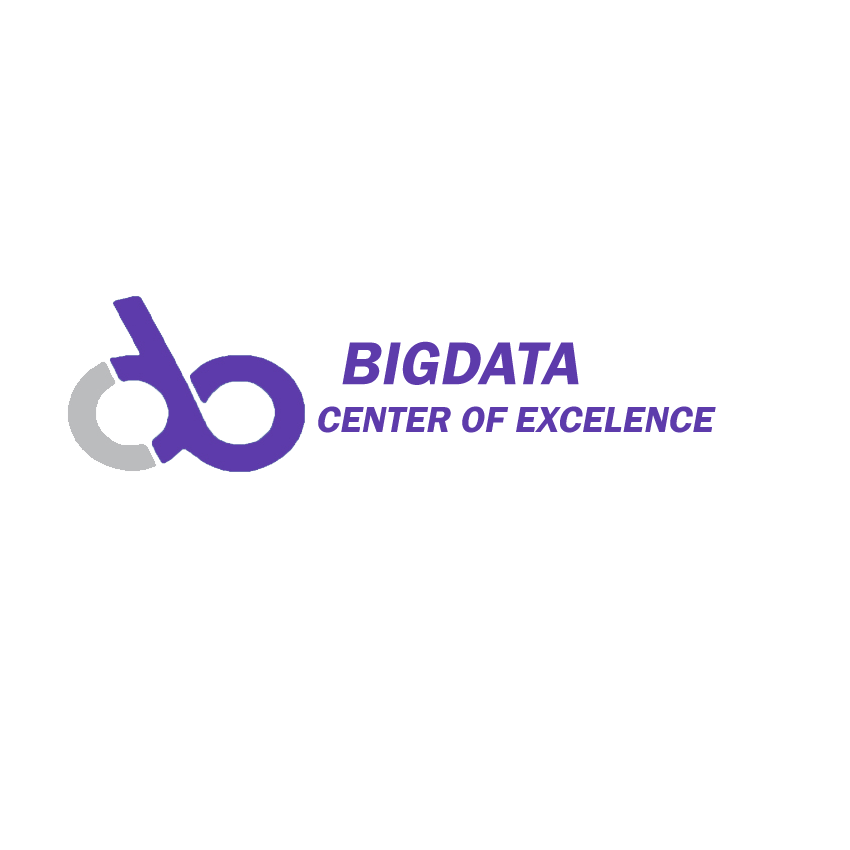
<style>
.page{position:relative;width:850px;height:850px;background:#ffffff}
.page>*{position:absolute;margin:0}
.t1{font:62.4px "FranklinGothic-Demi";color:#5d3bab;font-style:italic}
.t2{font:37.4px "FranklinGothic-Demi";color:#5d3bab;font-style:italic}
</style>
<div class="page">
<p class="t1" style="left:342px;top:341px;width:237px;height:44px">BIGDATA</p>
<p class="t2" style="left:318px;top:406px;width:398px;height:27px">CENTER OF EXCELENCE</p>
</div>
